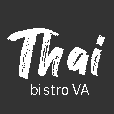
<style>
.page{position:relative;width:114px;height:114px;background:#333333}
.page>*{position:absolute;margin:0}
.t1{font:66px "Hey-August";letter-spacing:0.02em;color:#ffffff}
.t2{font:14px "PublicSans-Light";letter-spacing:0.02em;color:#ffffff}
</style>
<div class="page">
<p class="t1" style="left:7px;top:28px;width:98px;height:51px">Thai</p>
<p class="t2" style="left:31px;top:84px;width:58px;height:11px">bistro VA</p>
</div>
